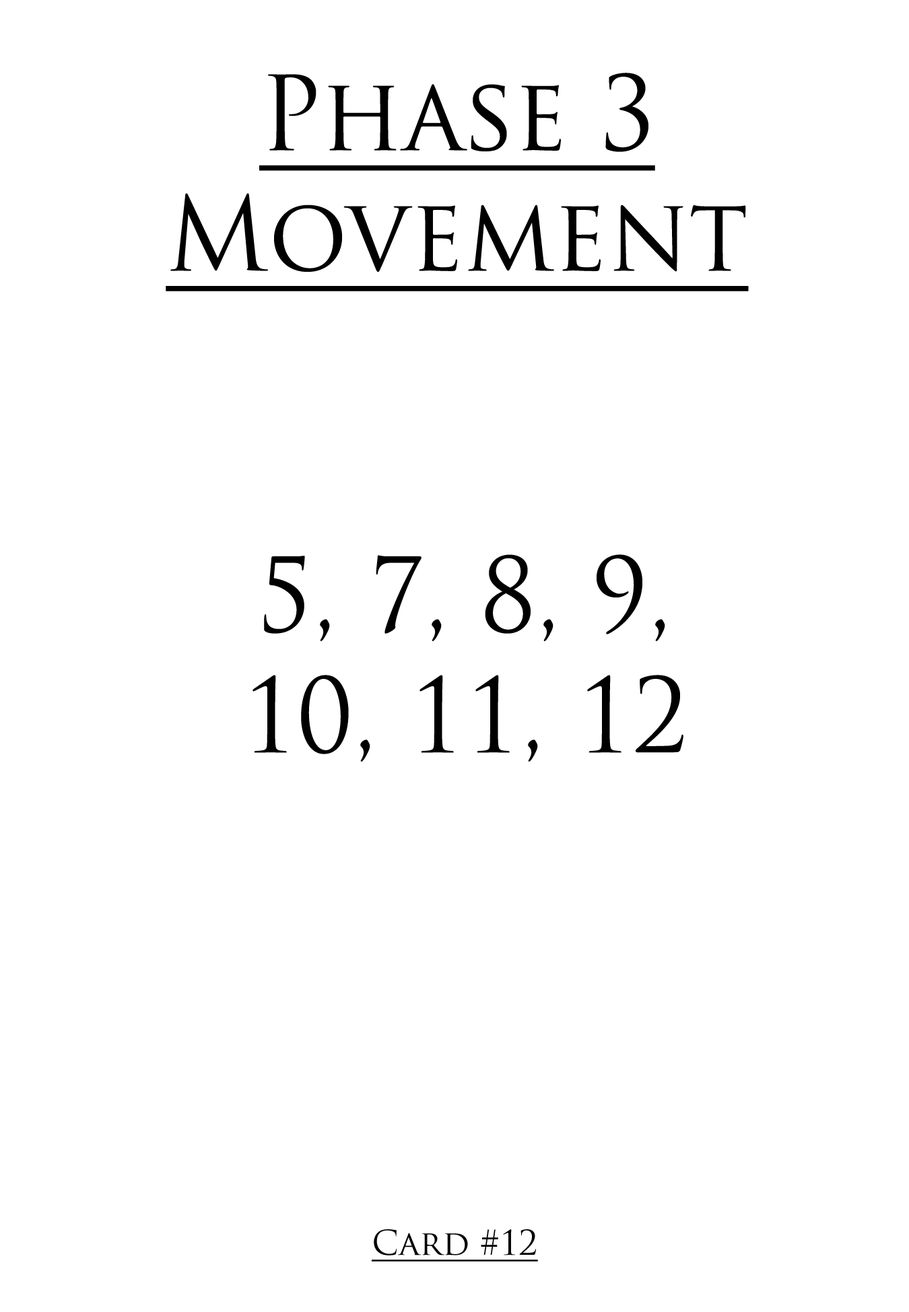
<style>
.page{position:relative;width:909px;height:1312px;background:#ffffff}
.page>*{position:absolute;margin:0}
.t1{font:100.6px "TrajanPro-Regular";color:#000000;text-decoration:underline;scale:0.97 1}
.t2{font:100.6px "TrajanPro-Regular";color:#000000;scale:0.97 1}
.t3{font:33.5px "TrajanPro-Regular";color:#000000;text-decoration:underline}
</style>
<div class="page">
<p class="t1" style="left:166px;top:73px;width:582px;height:218px;text-align:center">Phase 3<br>Movement</p>
<p class="t2" style="left:252px;top:555px;width:431px;height:207px;text-align:center">5, 7, 8, 9,<br>10, 11, 12</p>
<p class="t3" style="left:372px;top:1230px;width:166px;height:32px">Card #12</p>
</div>
